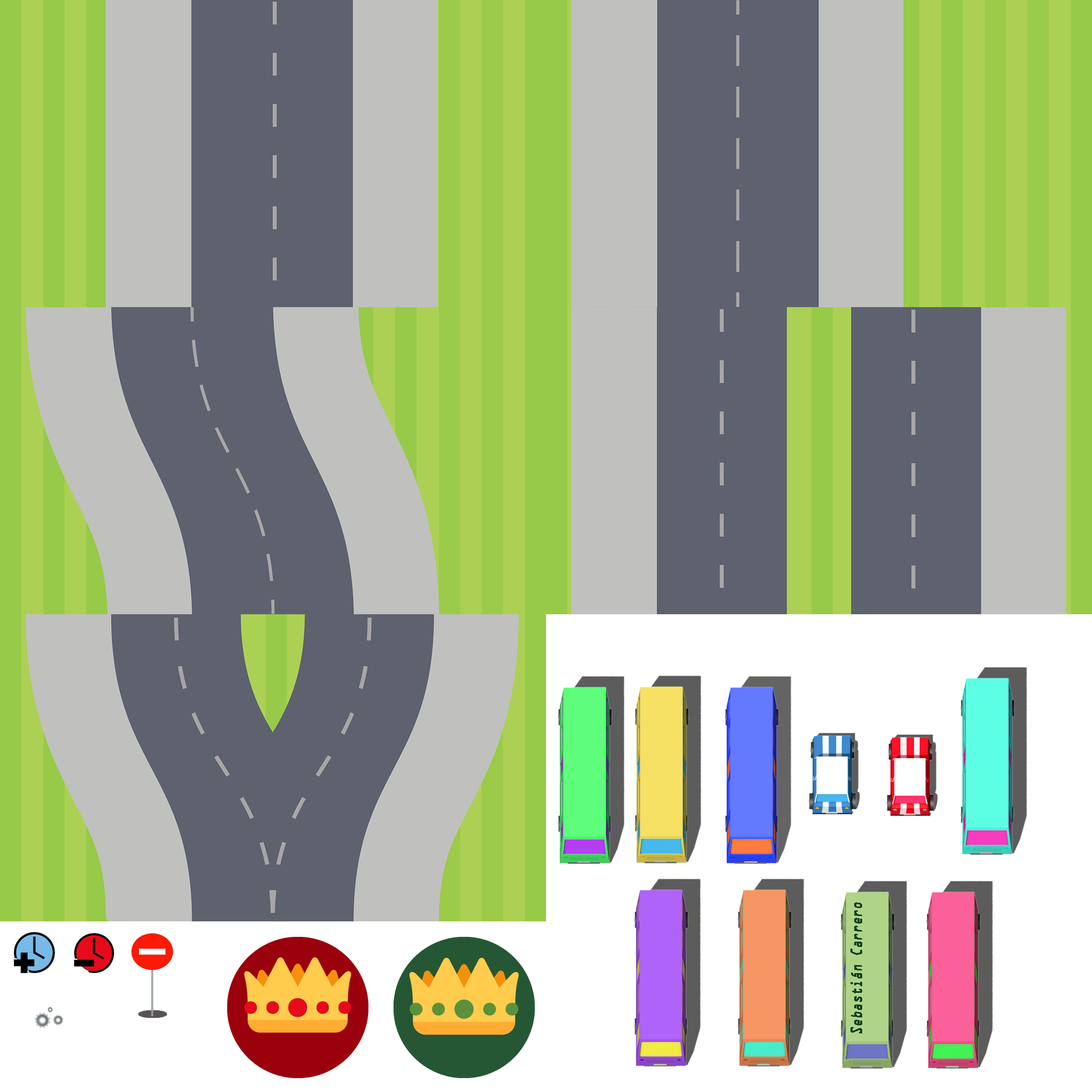
<style>
.page{position:relative;width:1092px;height:1092px;background:#5e626f}
.page>*{position:absolute;margin:0}
.t1{font:14.2px "OCRAStd";color:#113e1c;font-weight:bold;font-style:italic;scale:0.71 1}
</style>
<div class="page">
<p class="t1" style="left:850px;top:902px;width:12px;height:131px;rotate:-90deg">Sebastián Carrero</p>
</div>
